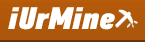
<style>
.page{position:relative;width:145px;height:42px}
.page>*{position:absolute;margin:0}
.t1{font:31.2px "PFDinTextCompPro-XBlackItalic";color:#ffffff;scale:1.22 1}
</style>
<div class="page">
<p class="t1" style="left:8px;top:7px;width:107px;height:23px">iUrMine</p>
</div>
